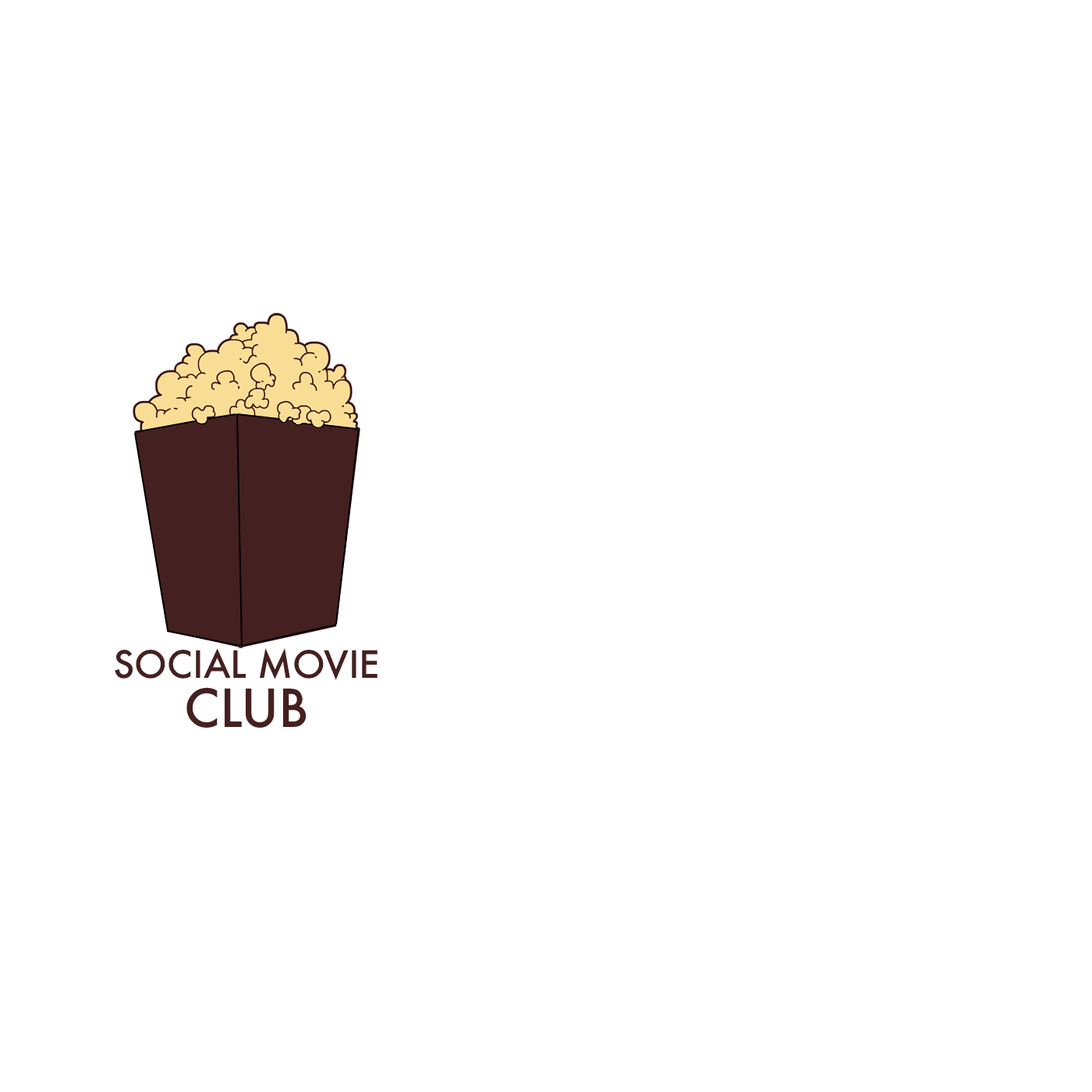
<style>
.page{position:relative;width:1092px;height:1092px;background:#ffffff}
.page>*{position:absolute;margin:0}
.t1{font:36.4px "Futura-Medium";color:#452020}
.t2{font:50.9px "Futura-Medium";color:#452020}
</style>
<div class="page">
<p class="t1" style="left:115px;top:648px;width:263px;height:32px">SOCIAL MOVIE</p>
<p class="t2" style="left:186px;top:687px;width:120px;height:41px">CLUB</p>
</div>
